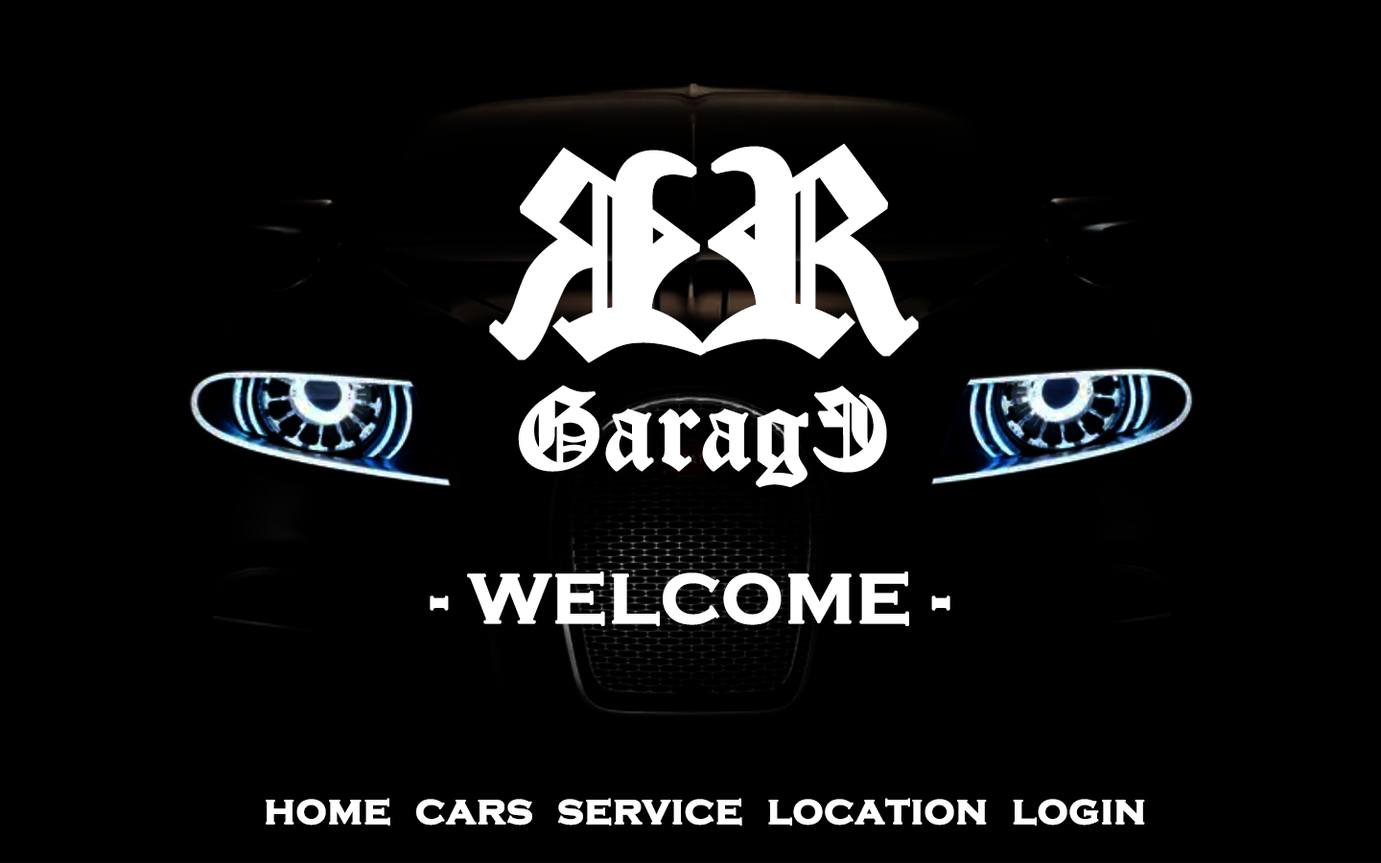
<style>
.page{position:relative;width:1381px;height:863px;background:#000000}
.page>*{position:absolute;margin:0}
.t1{font:302.7px "OldLondonAlternate";color:#ffffff;text-transform:uppercase;font-weight:bold}
.t2{font:71.9px "CopperplateGothic-Bold";color:#ffffff;text-transform:uppercase;font-weight:bold}
.t3{font:42.5px "CopperplateGothic-Bold";color:#ffffff;font-weight:bold}
</style>
<div class="page">
<p class="t1" style="left:489px;top:148px;width:218px;height:216px;rotate:180deg">R</p>
<p class="t1" style="left:701px;top:144px;width:218px;height:216px">R</p>
<p class="t2" style="left:430px;top:572px;width:521px;height:54px">- Welcome -</p>
<p class="t3" style="left:266px;top:798px;width:879px;height:28px">home  cars  service  location  login</p>
</div>
